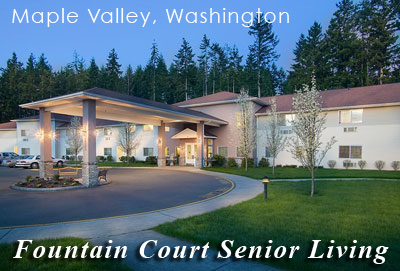
<style>
.page{position:relative;width:400px;height:271px}
.page>*{position:absolute;margin:0}
.t1{font:20.4px "CenturyGothic";letter-spacing:0.05em;color:#ffffff}
.t2{font:27.2px "TimesNewRomanPS-BoldItalicMT";letter-spacing:0.05em;color:#ffffff}
</style>
<div class="page">
<p class="t1" style="left:12px;top:8px;width:277px;height:19px">Maple Valley, Washington</p>
<p class="t2" style="left:13px;top:240px;width:376px;height:24px">Fountain Court Senior Living</p>
</div>
